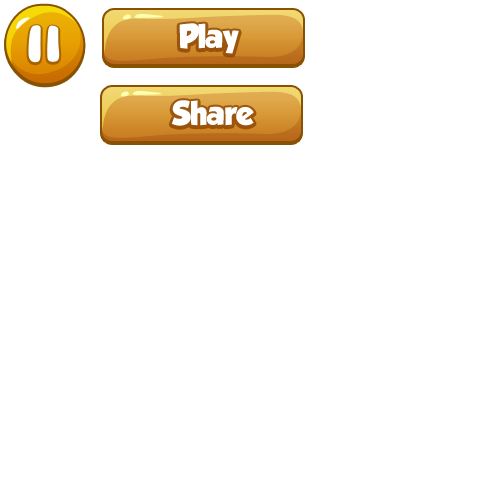
<style>
.page{position:relative;width:500px;height:500px;background:#ffffff}
.page>*{position:absolute;margin:0}
.t1{font:30px "GROBOLD";letter-spacing:-0.02em;color:#ffffff}
</style>
<div class="page">
<p class="t1" style="left:179px;top:23px;width:60px;height:31px">Play</p>
<p class="t1" style="left:171px;top:100px;width:83px;height:26px">Share</p>
</div>
